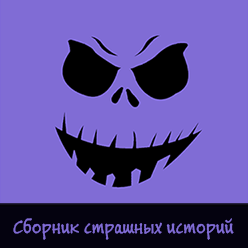
<style>
.page{position:relative;width:248px;height:248px;background:#806cd5}
.page>*{position:absolute;margin:0}
.t1{font:21.3px "BuxtonSketch";color:#806cd5}
</style>
<div class="page">
<p class="t1" style="left:13px;top:218px;width:221px;height:22px">Сборник страшных историй</p>
</div>
